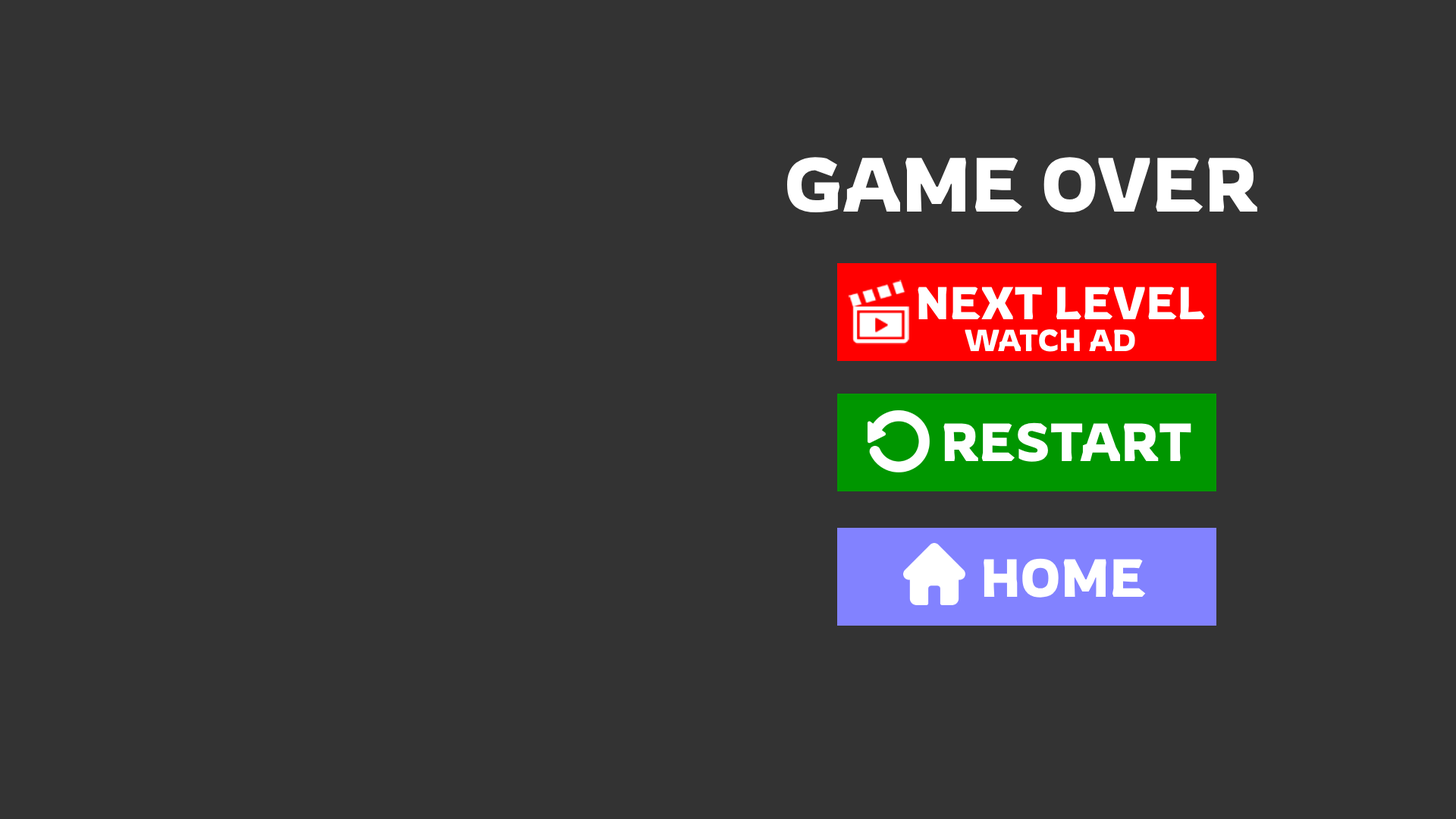
<style>
.page{position:relative;width:1456px;height:819px;background:#333333}
.page>*{position:absolute;margin:0}
.t1{font:75.8px "Rowdies-Regular";color:#ffffff}
.t2{font:45.5px "Rowdies-Regular";color:#ffffff}
.t3{font:30.3px "Rowdies-Regular";color:#ffffff}
.t4{font:53.1px "Rowdies-Regular";color:#ffffff}
</style>
<div class="page">
<p class="t1" style="left:787px;top:157px;width:470px;height:55px">GAME OVER</p>
<p class="t2" style="left:918px;top:287px;width:287px;height:32px">NEXT LEVEL</p>
<p class="t3" style="left:965px;top:329px;width:170px;height:23px">WATCH AD</p>
<p class="t4" style="left:943px;top:422px;width:248px;height:40px">RESTART</p>
<p class="t4" style="left:984px;top:558px;width:162px;height:40px">HOME</p>
</div>
